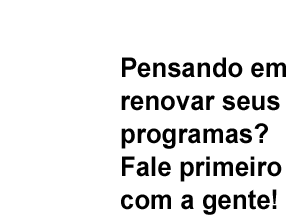
<style>
.page{position:relative;width:289px;height:217px;background:#ffffff}
.page>*{position:absolute;margin:0}
.t1{font:27.3px "Arial-BoldMT";color:#000000;scale:0.95 1}
</style>
<div class="page">
<p class="t1" style="left:121px;top:57px;width:165px;height:158px">Pensando em<br>renovar seus<br>programas?<br>Fale primeiro<br>com a gente!</p>
</div>
